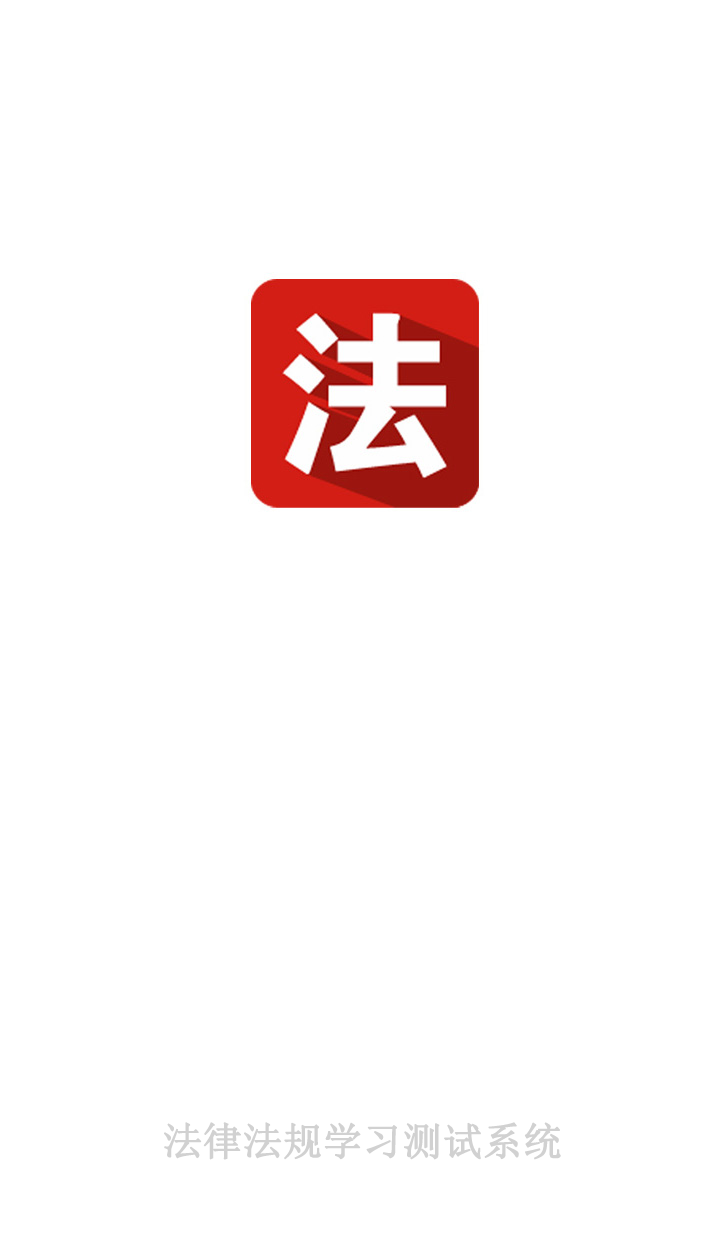
<style>
.page{position:relative;width:720px;height:1242px;background:#ffffff}
.page>*{position:absolute;margin:0}
.t1{font:39px "SimSun";color:#d1d1d1;font-weight:bold}
</style>
<div class="page">
<p class="t1" style="left:164px;top:1122px;width:397px;height:38px">法律法规学习测试系统</p>
</div>
